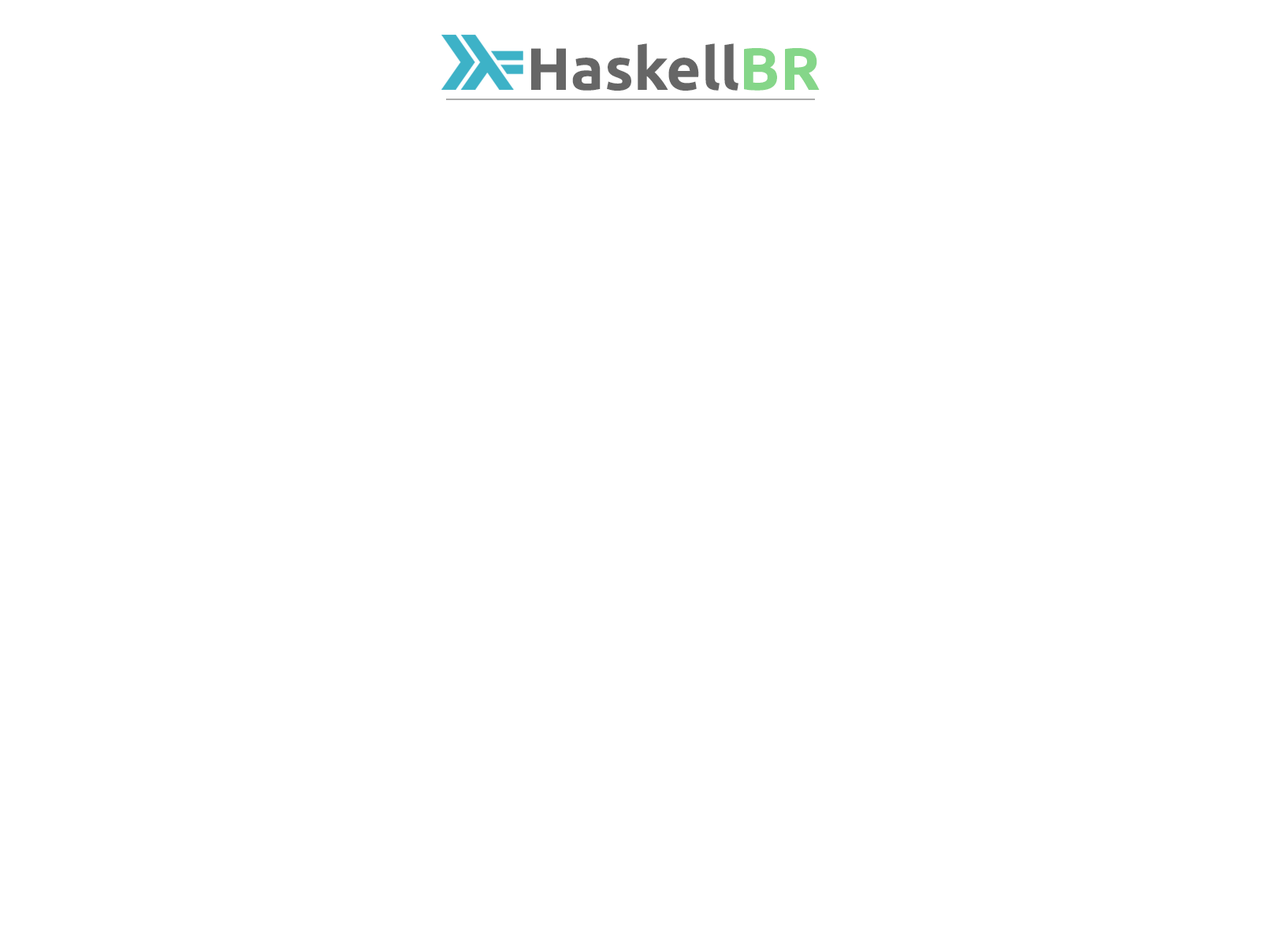
<style>
.page{position:relative;width:1261px;height:946px;background:#ffffff}
.page>*{position:absolute;margin:0}
.t1{font:59.8px "Ubuntu-Bold";color:#666666}
.t2{font:59.8px "Ubuntu-Bold";color:#85d689}
</style>
<div class="page">
<p class="t1" style="left:531px;top:43px;width:289px;height:48px">Haskell<span class="t2">BR</span></p>
</div>
